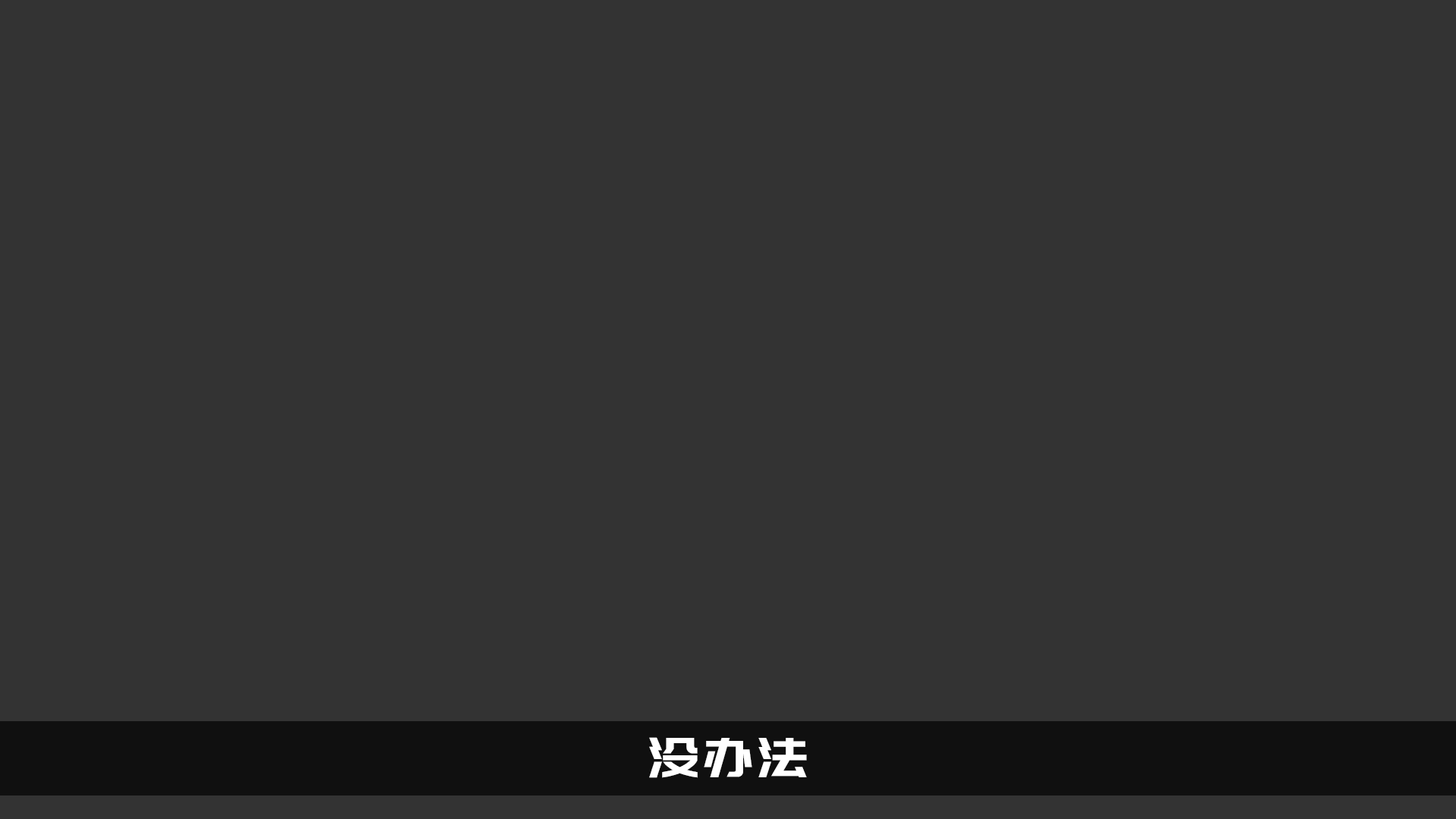
<style>
.page{position:relative;width:1456px;height:819px;background:#333333}
.page>*{position:absolute;margin:0}
.t1{font:54.6px "PangMenZhengDao-3";color:#ffffff}
</style>
<div class="page">
<p class="t1" style="left:649px;top:737px;width:158px;height:41px">没办法</p>
</div>
